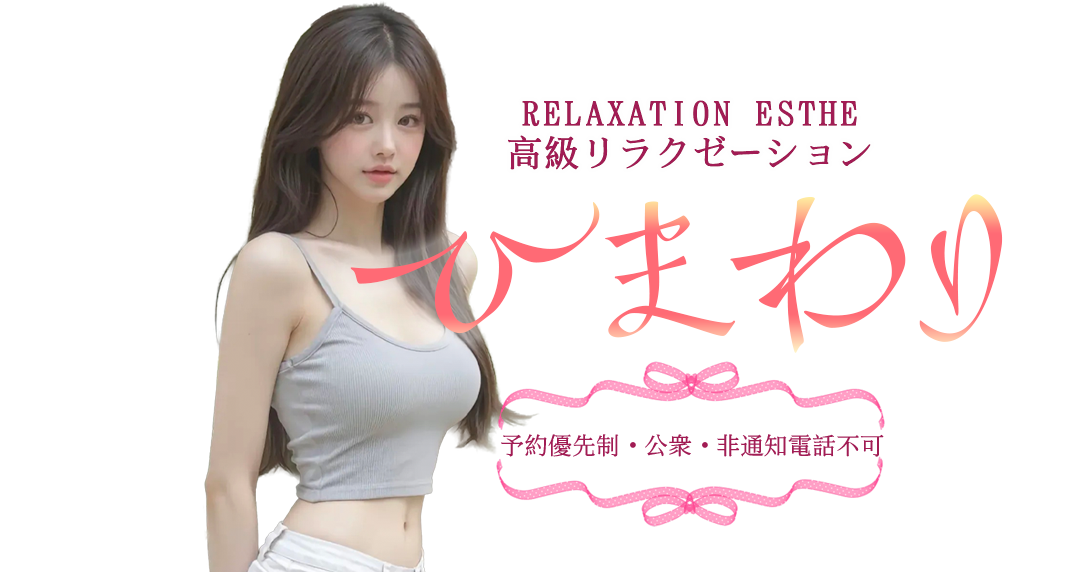
<style>
.page{position:relative;width:1080px;height:572px;background:#ffffff}
.page>*{position:absolute;margin:0}
.t1{font:35.4px "SimSong-Bold";letter-spacing:0.1em;color:#a11c54}
.t2{font:36.8px "SimSong-Bold";color:#a11c54}
.t3{font:164.8px "Kizashi-Regular";color:#ff6a75}
.t4{font:24px "SimSong-Regular";color:#a11c54}
.t5{font:24px "AdobeHeitiStd-Regular";color:#a11c54}
</style>
<div class="page">
<p class="t1" style="left:522px;top:100px;width:335px;height:27px">RELAXATION ESTHE</p>
<p class="t2" style="left:508px;top:135px;width:363px;height:35px">高級リラクゼーション</p>
<p class="t3" style="left:350px;top:194px;width:653px;height:159px">ひまわり</p>
<p class="t4" style="left:501px;top:434px;width:383px;height:23px">予約優先制<span class="t5">・</span>公衆<span class="t5">・</span>非通知電話不可</p>
</div>
